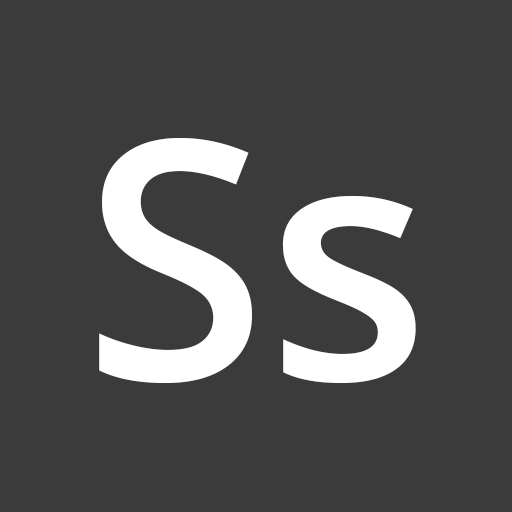
<style>
.page{position:relative;width:512px;height:512px;background:#3b3b3b}
.page>*{position:absolute;margin:0}
.t1{font:334.5px "OpenSans-Semibold";color:#ffffff}
</style>
<div class="page">
<p class="t1" style="left:99px;top:138px;width:317px;height:245px">Ss</p>
</div>
